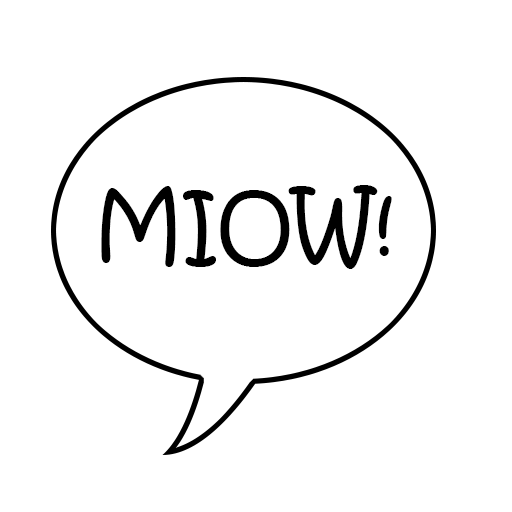
<style>
.page{position:relative;width:512px;height:512px;background:#ffffff}
.page>*{position:absolute;margin:0}
.t1{font:84.7px "KristenITC-Regular";color:#000000}
</style>
<div class="page">
<p class="t1" style="left:101px;top:185px;width:291px;height:84px">MIOW!</p>
</div>
